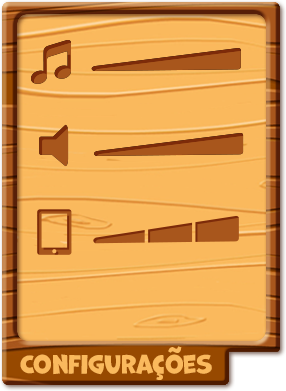
<style>
.page{position:relative;width:286px;height:391px;background:#fab95d}
.page>*{position:absolute;margin:0}
.t1{font:24px "Marvin";letter-spacing:-0.01em;color:#fab95d}
</style>
<div class="page">
<p class="t1" style="left:168px;top:346px;width:14px;height:7px">~</p>
<p class="t1" style="left:20px;top:354px;width:192px;height:26px">Configuraçoes</p>
</div>
